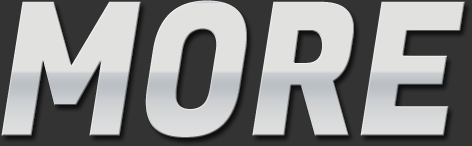
<style>
.page{position:relative;width:472px;height:146px;background:#333333}
.page>*{position:absolute;margin:0}
.t1{font:185.2px "FugazOne-Regular";color:#dfdfdf;scale:0.89 1}
</style>
<div class="page">
<p class="t1" style="left:1px;top:0px;width:464px;height:138px">MORE</p>
</div>
